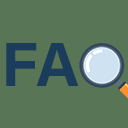
<style>
.page{position:relative;width:128px;height:128px;background:#587556}
.page>*{position:absolute;margin:0}
.t1{font:62.5px "AcuminConcept-Bold";color:#1c3c5b}
</style>
<div class="page">
<p class="t1" style="left:6px;top:43px;width:73px;height:43px">FA</p>
</div>
